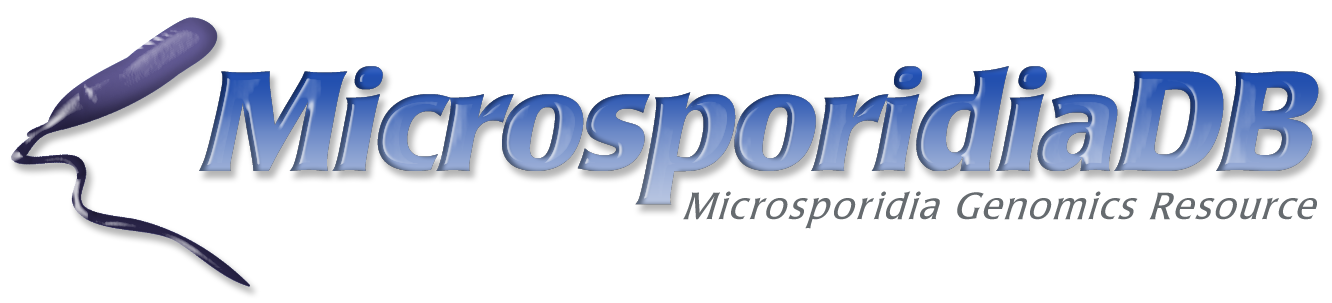
<style>
.page{position:relative;width:1332px;height:303px;background:#ffffff}
.page>*{position:absolute;margin:0}
.t1{font:144.4px "PopplLaudatio-Bold";letter-spacing:-0.03em}
.t2{font:38.9px "LaudatioC";letter-spacing:0.05em;color:#666b6f;scale:0.96 1}
</style>
<div class="page">
<p class="t1" style="left:199px;top:66px;width:1120px;height:139px">MicrosporidiaDB</p>
<p class="t2" style="left:683px;top:191px;width:634px;height:38px">Microsporidia Genomics Resource</p>
</div>
